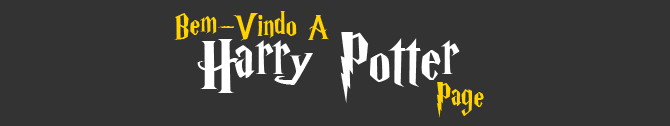
<style>
.page{position:relative;width:670px;height:126px;background:#333333}
.page>*{position:absolute;margin:0}
.t1{font:37px "HarryP";color:#ffd200}
.t2{font:74px "HarryP";color:#ffffff}
</style>
<div class="page">
<p class="t1" style="left:174px;top:11px;width:155px;height:30px">Bem-Vindo A</p>
<p class="t2" style="left:197px;top:32px;width:263px;height:71px">Harry Potter</p>
</div>
